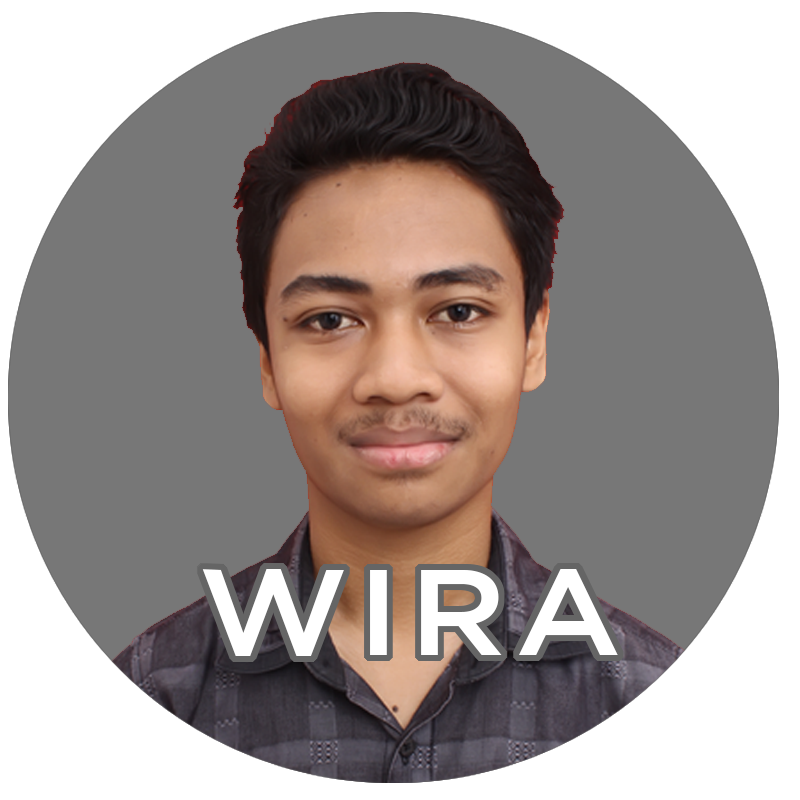
<style>
.page{position:relative;width:800px;height:800px;background:#777777}
.page>*{position:absolute;margin:0}
.t1{font:121.6px "Gotham-Medium";letter-spacing:0.066em;color:#ffffff;scale:1.11 1}
</style>
<div class="page">
<p class="t1" style="left:202px;top:569px;width:416px;height:87px">WIRA</p>
<p class="t1" style="left:202px;top:569px;width:416px;height:87px">WIRA</p>
</div>
